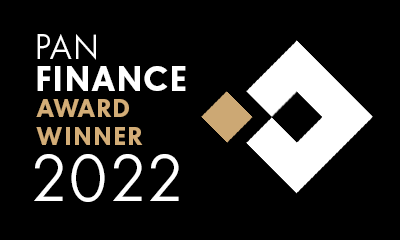
<style>
.page{position:relative;width:400px;height:240px;background:#000000}
.page>*{position:absolute;margin:0}
.t1{font:32px/32px "Absolut-Bold";letter-spacing:0.01em;color:#ffffff;text-transform:uppercase}
.t2{font:32px/32px "Absolut-Regular";letter-spacing:0.01em;color:#ffffff;text-transform:uppercase}
.t3{font:24px "Absolut-Bold";letter-spacing:0.01em;color:#d3ad77;text-transform:uppercase}
.t4{font:61.6px "Absolut-Regular";letter-spacing:0.01em;color:#ffffff;text-transform:uppercase}
</style>
<div class="page">
<p class="t1" style="left:37px;top:34px;width:149px;height:57px"><span class="t2">Pan</span><br>Finance</p>
<p class="t3" style="left:36px;top:99px;width:107px;height:46px">Award<br>Winner</p>
<p class="t4" style="left:34px;top:154px;width:145px;height:48px">2022</p>
</div>
